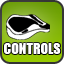
<style>
.page{position:relative;width:64px;height:64px}
.page>*{position:absolute;margin:0}
.t1{font:14px "Impact";color:#ffffff}
</style>
<div class="page">
<p class="t1" style="left:4px;top:43px;width:57px;height:11px">CONTROLS</p>
</div>
